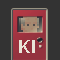
<style>
.page{position:relative;width:60px;height:60px;background:#333333}
.page>*{position:absolute;margin:0}
.t1{font:18.4px "AcuminConcept-SemiCondensedBold";color:#e9e4d8;text-transform:uppercase}
</style>
<div class="page">
<p class="t1" style="left:19px;top:40px;width:16px;height:13px">KI</p>
</div>
